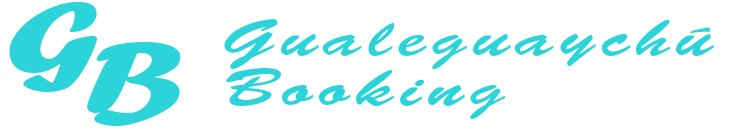
<style>
.page{position:relative;width:730px;height:130px;background:#ffffff}
.page>*{position:absolute;margin:0}
.t1{font:105px "ForteMT";letter-spacing:0.1em;color:#2cd4d9;scale:1.43 1}
.t2{font:52.5px/50px "BrushScriptStd";letter-spacing:0.1em;color:#2cd4d9;scale:1.43 1}
</style>
<div class="page">
<p class="t1" style="left:9px;top:2px;width:88px;height:90px">G</p>
<p class="t2" style="left:224px;top:19px;width:490px;height:100px">Gualeguaychú<br>Booking</p>
<p class="t1" style="left:87px;top:42px;width:94px;height:84px">B</p>
</div>
